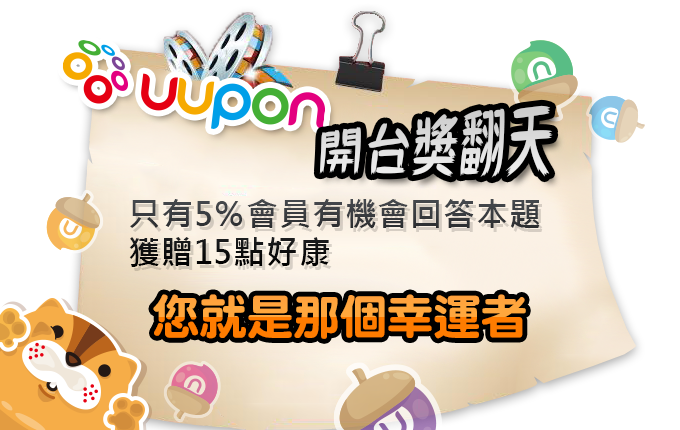
<style>
.page{position:relative;width:680px;height:430px;background:#ffffff}
.page>*{position:absolute;margin:0}
.t1{font:45.4px "DFShuaShuaStd-W7";color:#dedede;scale:1.05 1}
.t2{font:32px "MicrosoftJhengHeiBold";letter-spacing:0.025em}
.t3{font:48px "DFNYuan-XB-HK-BF";letter-spacing:-0.025em}
</style>
<div class="page">
<p class="t1" style="left:319px;top:105px;width:234px;height:73px;rotate:-3deg">開台獎翻天</p>
<p class="t2" style="left:129px;top:199px;width:411px;height:68px">只有5％會員有機會回答本題<br>獲贈15點好康</p>
<p class="t3" style="left:153px;top:294px;width:373px;height:45px">您就是那個幸運者</p>
</div>
